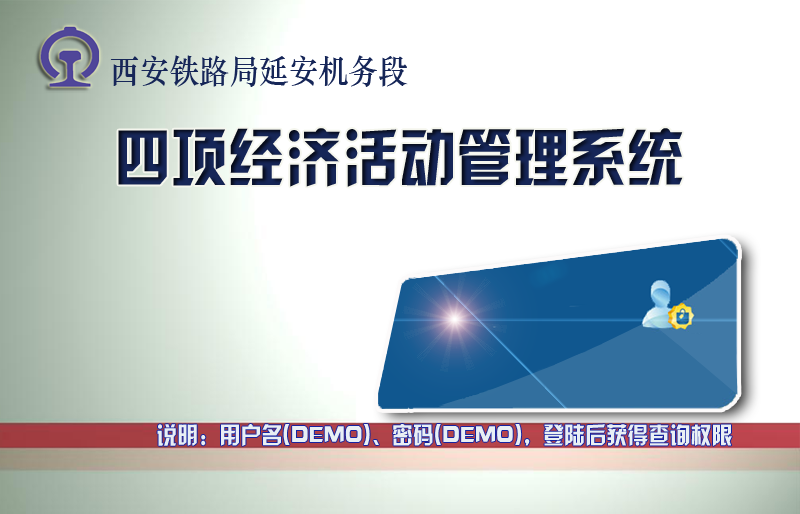
<style>
.page{position:relative;width:800px;height:514px;background:#ffffff}
.page>*{position:absolute;margin:0}
.t1{font:33.5px "STZhongsong";color:#162658;scale:0.89 1}
.t2{font:62px "HYk2gj";color:#162658;scale:0.92 1}
.t3{font:23.4px "HYk2gj";color:#e9eff4;scale:0.9 1}
</style>
<div class="page">
<p class="t1" style="left:110px;top:55px;width:298px;height:32px">西安铁路局延安机务段</p>
<p class="t2" style="left:118px;top:128px;width:565px;height:59px">四项经济活动管理系统</p>
<p class="t3" style="left:157px;top:424px;width:575px;height:22px">说明：用户名(DEMO)、密码(DEMO)，登陆后获得查询权限</p>
</div>
